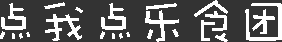
<style>
.page{position:relative;width:282px;height:42px;background:#333333}
.page>*{position:absolute;margin:0}
.t1{font:49.9px "DFWaWaSC-W5";color:#ffffff}
</style>
<div class="page">
<p class="t1" style="left:0px;top:0px;width:282px;height:42px">点我点乐食团</p>
</div>
